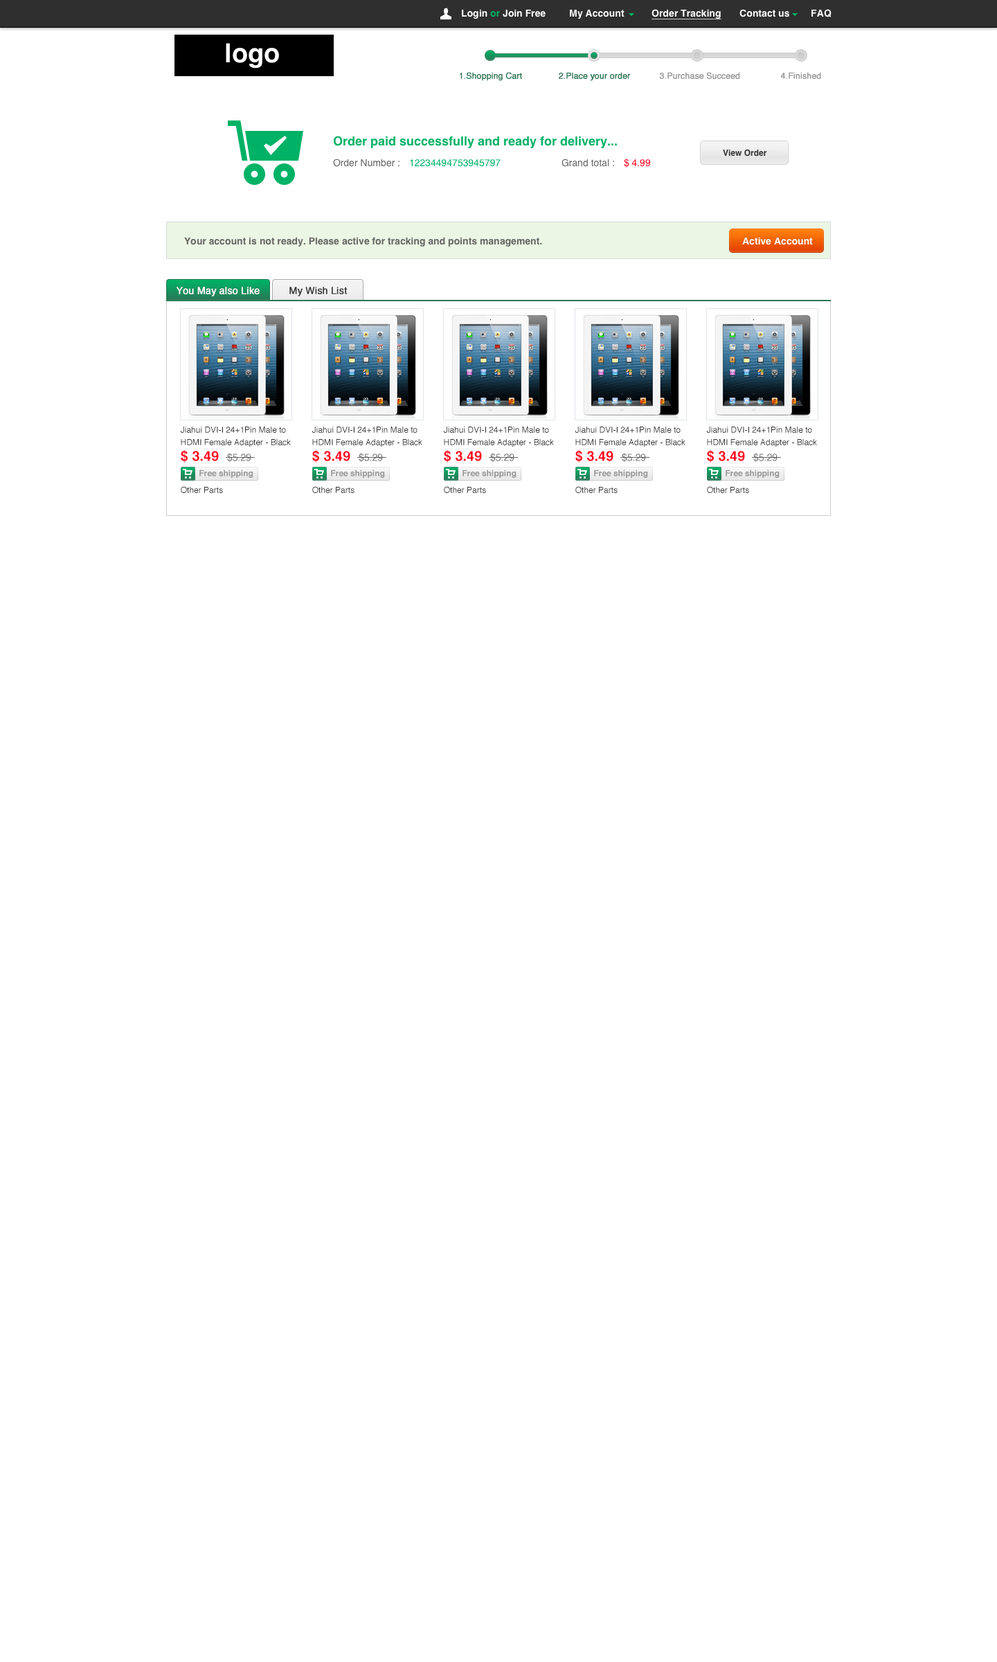
<style>
.page{position:relative;width:997px;height:1662px;background:#ffffff}
.page>*{position:absolute;margin:0}
.t1{font:9.7px "Helvetica-Bold";color:#ffffff}
.t2{font:9.7px "Helvetica-Bold";color:#00b266}
.t3{font:9.7px "Helvetica-Bold";color:#ffffff;text-decoration:underline}
.t4{font:26.3px "Helvetica-Bold";color:#ffffff}
.t5{font:8.3px "Helvetica";color:#287755;font-weight:bold}
.t6{font:8.3px "Helvetica";color:#999999;font-weight:bold}
.t7{font:12.5px "Helvetica-Bold";color:#00b266}
.t8{font:8.3px "Helvetica-Bold";color:#333333}
.t9{font:9.7px "Helvetica";color:#666666}
.t10{font:9.7px "Helvetica";color:#00b266}
.t11{font:9.7px "Helvetica";color:#ff001e}
.t12{font:9.7px "Helvetica-Bold";color:#666666}
.t13{font:9.7px "Helvetica";color:#ffffff;font-weight:bold}
.t14{font:9.7px "Helvetica";color:#333333;font-weight:bold}
.t15{font:8.3px/12.5px "Helvetica";color:#333333}
.t16{font:13.8px "Helvetica-Bold";color:#ff001e}
.t17{font:8.3px "Helvetica-Bold";color:#999999}
.t18{font:8.3px "Helvetica";color:#333333}
</style>
<div class="page">
<p class="t1" style="left:462px;top:9px;width:84px;height:10px">Login <span class="t2">or </span>Join Free</p>
<p class="t1" style="left:570px;top:9px;width:54px;height:10px">My Account</p>
<p class="t3" style="left:651px;top:9px;width:70px;height:10px">Order Tracking</p>
<p class="t1" style="left:739px;top:9px;width:50px;height:8px">Contact us</p>
<p class="t1" style="left:811px;top:9px;width:20px;height:8px">FAQ</p>
<p class="t4" style="left:226px;top:43px;width:53px;height:26px">logo</p>
<p class="t5" style="left:459px;top:72px;width:63px;height:9px">1.Shopping Cart</p>
<p class="t5" style="left:559px;top:72px;width:72px;height:9px">2.Place your order</p>
<p class="t6" style="left:659px;top:72px;width:81px;height:7px">3.Purchase Succeed</p>
<p class="t6" style="left:780px;top:72px;width:41px;height:7px">4.Finished</p>
<p class="t7" style="left:333px;top:136px;width:284px;height:12px">Order paid successfully and ready for delivery...</p>
<p class="t8" style="left:723px;top:149px;width:44px;height:7px">View Order</p>
<p class="t9" style="left:333px;top:159px;width:66px;height:8px">Order Number :</p>
<p class="t10" style="left:410px;top:159px;width:91px;height:8px">12234494753945797</p>
<p class="t9" style="left:561px;top:159px;width:53px;height:8px">Grand total :</p>
<p class="t11" style="left:624px;top:159px;width:27px;height:9px">$ 4.99</p>
<p class="t12" style="left:184px;top:237px;width:358px;height:9px">Your account is not ready. Please active for tracking and points management.</p>
<p class="t1" style="left:742px;top:237px;width:71px;height:8px">Active Account</p>
<p class="t13" style="left:177px;top:287px;width:83px;height:9px">You May also Like</p>
<p class="t14" style="left:289px;top:287px;width:59px;height:9px">My Wish List</p>
<p class="t15" style="left:180px;top:426px;width:111px;height:21px">Jiahui DVI-I 24+1Pin Male to HDMI Female Adapter - Black</p>
<p class="t15" style="left:312px;top:426px;width:110px;height:21px">Jiahui DVI-I 24+1Pin Male to HDMI Female Adapter - Black</p>
<p class="t15" style="left:443px;top:426px;width:111px;height:21px">Jiahui DVI-I 24+1Pin Male to HDMI Female Adapter - Black</p>
<p class="t15" style="left:575px;top:426px;width:110px;height:21px">Jiahui DVI-I 24+1Pin Male to HDMI Female Adapter - Black</p>
<p class="t15" style="left:706px;top:426px;width:111px;height:21px">Jiahui DVI-I 24+1Pin Male to HDMI Female Adapter - Black</p>
<p class="t16" style="left:181px;top:450px;width:70px;height:12px">$ 3.49   <span class="t9">$5.29</span></p>
<p class="t16" style="left:312px;top:450px;width:71px;height:12px">$ 3.49   <span class="t9">$5.29</span></p>
<p class="t16" style="left:444px;top:450px;width:70px;height:12px">$ 3.49   <span class="t9">$5.29</span></p>
<p class="t16" style="left:575px;top:450px;width:71px;height:12px">$ 3.49   <span class="t9">$5.29</span></p>
<p class="t16" style="left:707px;top:450px;width:70px;height:12px">$ 3.49   <span class="t9">$5.29</span></p>
<p class="t17" style="left:199px;top:469px;width:54px;height:9px">Free shipping</p>
<p class="t17" style="left:331px;top:469px;width:54px;height:9px">Free shipping</p>
<p class="t17" style="left:462px;top:469px;width:54px;height:9px">Free shipping</p>
<p class="t17" style="left:594px;top:469px;width:54px;height:9px">Free shipping</p>
<p class="t17" style="left:726px;top:469px;width:54px;height:9px">Free shipping</p>
<p class="t18" style="left:181px;top:486px;width:42px;height:7px">Other Parts</p>
<p class="t18" style="left:312px;top:486px;width:42px;height:7px">Other Parts</p>
<p class="t18" style="left:444px;top:486px;width:42px;height:7px">Other Parts</p>
<p class="t18" style="left:575px;top:486px;width:43px;height:7px">Other Parts</p>
<p class="t18" style="left:707px;top:486px;width:42px;height:7px">Other Parts</p>
</div>
